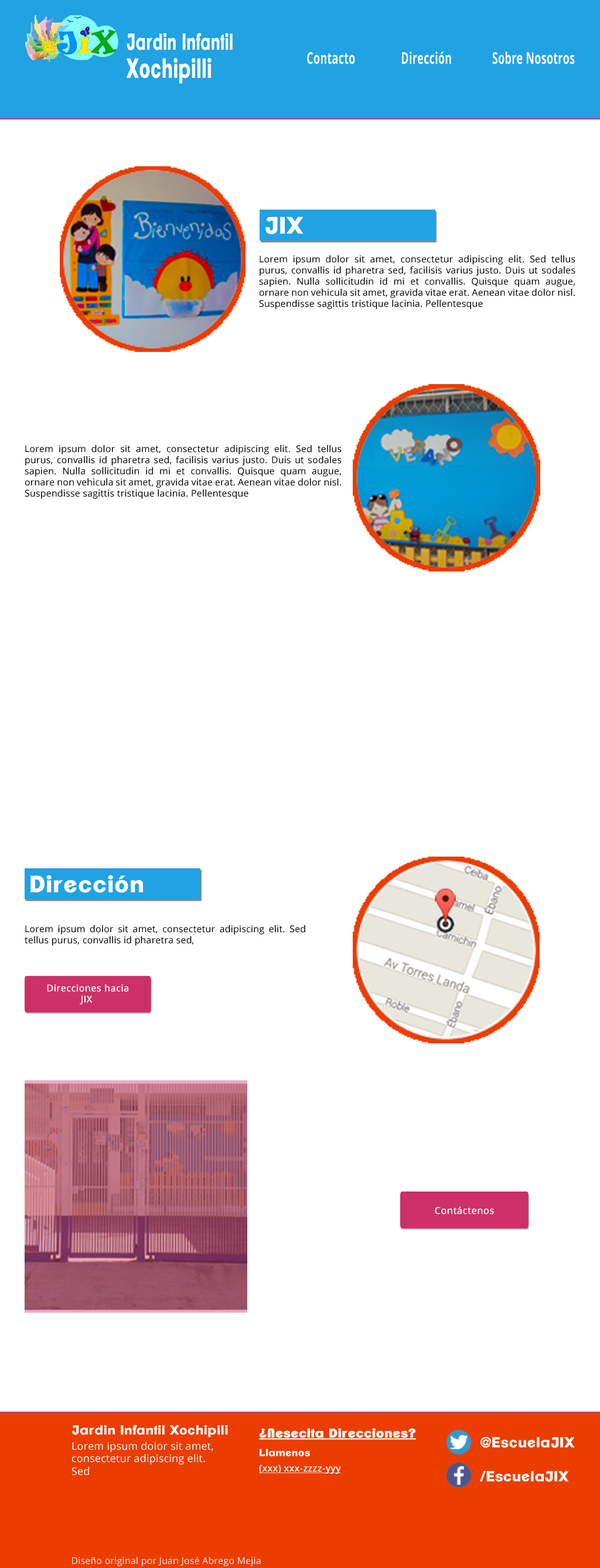
<style>
.page{position:relative;width:600px;height:1568px;background:#ffffff}
.page>*{position:absolute;margin:0}
.t1{font:22.5px/28.1px "ClementePDao-Heavy";letter-spacing:0.02em;color:#ffffff;scale:0.65 1}
.t2{font:27.1px/28.1px "ClementePDao-Heavy";letter-spacing:0.02em;color:#ffffff;scale:0.65 1}
.t3{font:16.1px "OpenSans-Bold";letter-spacing:0.02em;color:#ffffff;scale:0.65 1}
.t4{font:23.3px "ClementePDao-Heavy";letter-spacing:0.02em;color:#ffffff}
.t5{font:9.2px "OpenSans";letter-spacing:0.02em;color:#000000}
.t6{font:9.3px "OpenSans";letter-spacing:0.02em;color:#ffffff;font-weight:bold}
.t7{font:9.4px "OpenSans";letter-spacing:0.02em;color:#ffffff;font-weight:bold}
.t8{font:12.7px "ClementePDao-Heavy";letter-spacing:0.02em;color:#ffffff}
.t9{font:12.3px "ClementePDao-Heavy";letter-spacing:0.02em;color:#ffffff;font-weight:bold;text-decoration:underline}
.t10{font:10.4px "OpenSans";letter-spacing:0.02em;color:#ffffff}
.t11{font:14.2px "ClementePDao-Heavy";letter-spacing:0.02em;color:#ffffff}
.t12{font:10px "ClementePDao-Heavy";letter-spacing:0.02em;color:#ffffff}
.t13{font:9.2px "OpenSans";letter-spacing:0.02em;color:#ffffff;font-weight:bold;text-decoration:underline}
.t14{font:9.2px "OpenSans";letter-spacing:0.02em;color:#f4f4f4}
</style>
<div class="page">
<p class="t1" style="left:126px;top:33px;width:106px;height:51px">Jardin Infantil <br><span class="t2">Xochipilli</span></p>
<p class="t3" style="left:307px;top:52px;width:48px;height:12px">Contacto</p>
<p class="t3" style="left:402px;top:52px;width:49px;height:12px">Dirección</p>
<p class="t3" style="left:492px;top:52px;width:82px;height:12px">Sobre Nosotros</p>
<p class="t4" style="left:265px;top:217px;width:38px;height:17px">JIX</p>
<p class="t5" style="left:259px;top:255px;width:316px;height:54px;text-align:justify">Lorem ipsum dolor sit amet, consectetur adipiscing elit. Sed tellus purus, convallis id pharetra sed, facilisis varius justo. Duis ut sodales sapien. Nulla sollicitudin id mi et convallis. Quisque quam augue, ornare non vehicula sit amet, gravida vitae erat. Aenean vitae dolor nisl. Suspendisse sagittis tristique lacinia. Pellentesque</p>
<p class="t5" style="left:25px;top:445px;width:316px;height:54px;text-align:justify">Lorem ipsum dolor sit amet, consectetur adipiscing elit. Sed tellus purus, convallis id pharetra sed, facilisis varius justo. Duis ut sodales sapien. Nulla sollicitudin id mi et convallis. Quisque quam augue, ornare non vehicula sit amet, gravida vitae erat. Aenean vitae dolor nisl. Suspendisse sagittis tristique lacinia. Pellentesque</p>
<p class="t4" style="left:30px;top:875px;width:113px;height:18px">Dirección</p>
<p class="t5" style="left:25px;top:925px;width:280px;height:21px;text-align:justify">Lorem ipsum dolor sit amet, consectetur adipiscing elit. Sed tellus purus, convallis id pharetra sed,</p>
<p class="t6" style="left:47px;top:984px;width:81px;height:21px;text-align:center">Direcciones hacia<br>JIX</p>
<p class="t7" style="left:434px;top:1206px;width:60px;height:8px">Contáctenos</p>
<p class="t8" style="left:72px;top:1425px;width:156px;height:12px">Jardin Infantil Xochipili</p>
<p class="t9" style="left:259px;top:1428px;width:157px;height:12px">¿Nesecita Direcciones?</p>
<p class="t10" style="left:72px;top:1442px;width:141px;height:33px;text-align:justify">Lorem ipsum dolor sit amet,<br>consectetur adipiscing elit. <br>Sed</p>
<p class="t11" style="left:480px;top:1437px;width:94px;height:11px">@EscuelaJIX</p>
<p class="t12" style="left:259px;top:1449px;width:51px;height:8px">Llamenos</p>
<p class="t13" style="left:259px;top:1464px;width:82px;height:10px">(xxx) xxx-zzzz-yyy</p>
<p class="t11" style="left:480px;top:1471px;width:89px;height:11px">/EscuelaJIX</p>
<p class="t14" style="left:72px;top:1557px;width:189px;height:9px">Diseño original por Juan José Abrego Mejia</p>
</div>
